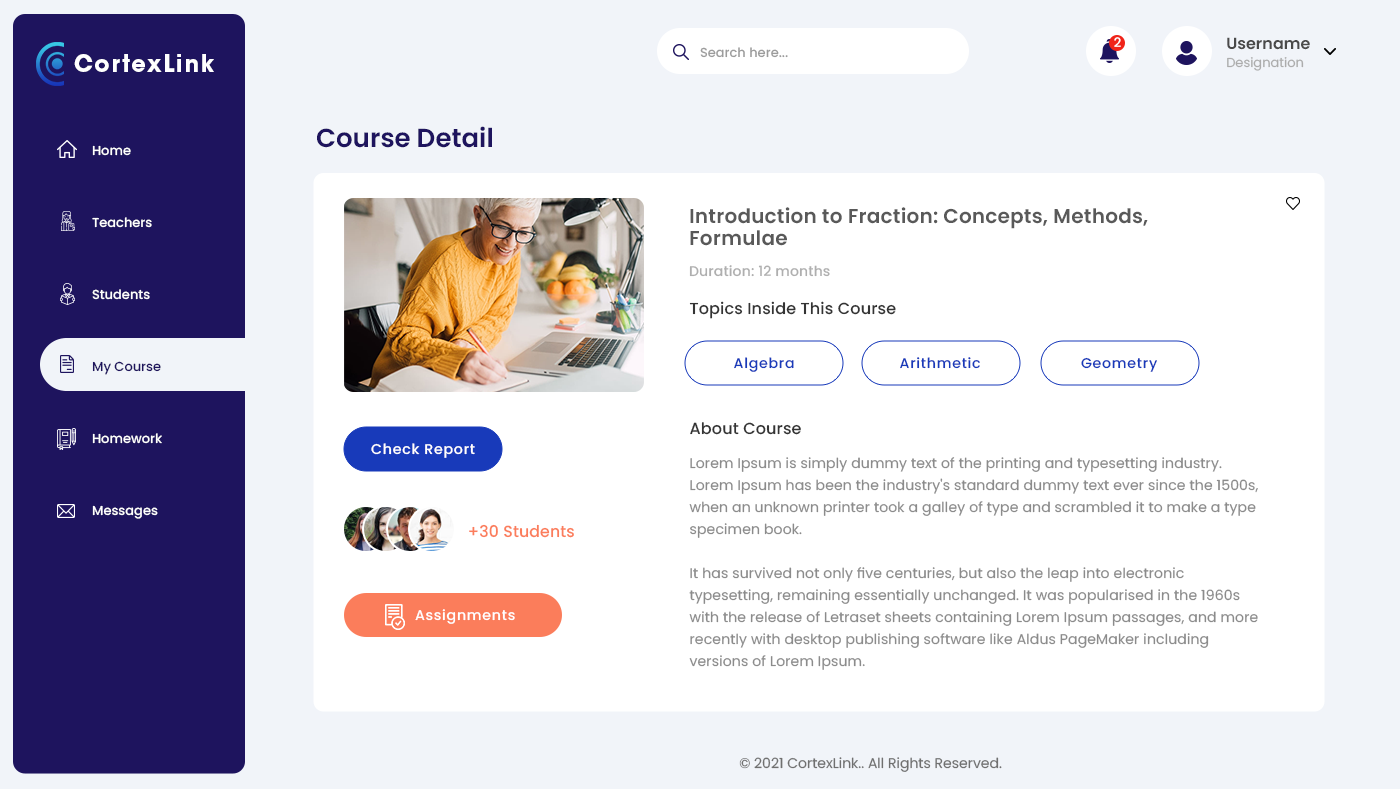
<style>
.page{position:relative;width:1400px;height:789px;background:#ffffff}
.page>*{position:absolute;margin:0}
.t1{font:13px "Poppins-Medium";color:#ffffff}
.t2{font:16px "Poppins-SemiBold";color:#4a4a4a}
.t3{font:23.2px "ITCAvantGardeStd-Bold";letter-spacing:0.075em;color:#ffffff}
.t4{font:13px "Poppins-Medium";color:#9c9c9c}
.t5{font:13px "Poppins-Regular";color:#acacac}
.t6{font:26px "Poppins-SemiBold";color:#1e145e}
.t7{font:13px/72px "Poppins-Medium";color:#ffffff}
.t8{font:13px/72px "Poppins-Medium";color:#1e145e}
.t9{font:20px/22px "Poppins-SemiBold";letter-spacing:0.01em;color:#595959}
.t10{font:14px "Poppins-Medium";letter-spacing:0.01em;color:#afafaf}
.t11{font:16px "Poppins-Medium";letter-spacing:0.01em;color:#343434}
.t12{font:14.1px "Poppins-Medium";letter-spacing:0.05em;color:#183aba}
.t13{font:14.1px "Poppins-Medium";letter-spacing:0.05em;color:#ffffff}
.t14{font:14px/22px "Poppins-Regular";letter-spacing:0.01em;color:#8a8a8a}
.t15{font:16.1px "Poppins-Medium";letter-spacing:0.01em;color:#fb7d5b}
.t16{font:14px "Poppins-Regular";color:#707070}
</style>
<div class="page">
<p class="t1" style="left:1114px;top:37px;width:7px;height:10px">2</p>
<p class="t2" style="left:1227px;top:37px;width:83px;height:13px">Username</p>
<p class="t3" style="left:74px;top:54px;width:140px;height:18px">CortexLink</p>
<p class="t4" style="left:700px;top:47px;width:88px;height:11px">Search here...</p>
<p class="t5" style="left:1227px;top:57px;width:77px;height:14px">Designation</p>
<p class="t6" style="left:317px;top:126px;width:175px;height:22px">Course Detail</p>
<p class="t7" style="left:92px;top:145px;width:70px;height:374px">Home<br>Teachers<br>Students<br><span class="t8">My Course<br></span>Homework<br>Messages</p>
<p class="t9" style="left:690px;top:207px;width:458px;height:39px">Introduction to Fraction: Concepts, Methods, Formulae</p>
<p class="t10" style="left:689px;top:265px;width:141px;height:12px">Duration: 12 months</p>
<p class="t11" style="left:689px;top:301px;width:207px;height:18px">Topics Inside This Course</p>
<p class="t12" style="left:734px;top:357px;width:60px;height:15px">Algebra</p>
<p class="t12" style="left:900px;top:357px;width:80px;height:12px">Arithmetic</p>
<p class="t12" style="left:1081px;top:357px;width:76px;height:15px">Geometry</p>
<p class="t11" style="left:690px;top:422px;width:111px;height:13px">About Course</p>
<p class="t13" style="left:371px;top:443px;width:104px;height:15px">Check Report</p>
<p class="t14" style="left:689px;top:457px;width:569px;height:213px">Lorem Ipsum is simply dummy text of the printing and typesetting industry. Lorem Ipsum has been the industry's standard dummy text ever since the 1500s, when an unknown printer took a galley of type and scrambled it to make a type specimen book.<br><br>It has survived not only five centuries, but also the leap into electronic typesetting, remaining essentially unchanged. It was popularised in the 1960s with the release of Letraset sheets containing Lorem Ipsum passages, and more recently with desktop publishing software like Aldus PageMaker including versions of Lorem Ipsum.</p>
<p class="t15" style="left:469px;top:524px;width:105px;height:14px">+30 Students</p>
<p class="t13" style="left:415px;top:609px;width:100px;height:15px">Assignments</p>
<p class="t16" style="left:739px;top:757px;width:263px;height:15px">© 2021 CortexLink.. All Rights Reserved.</p>
</div>
